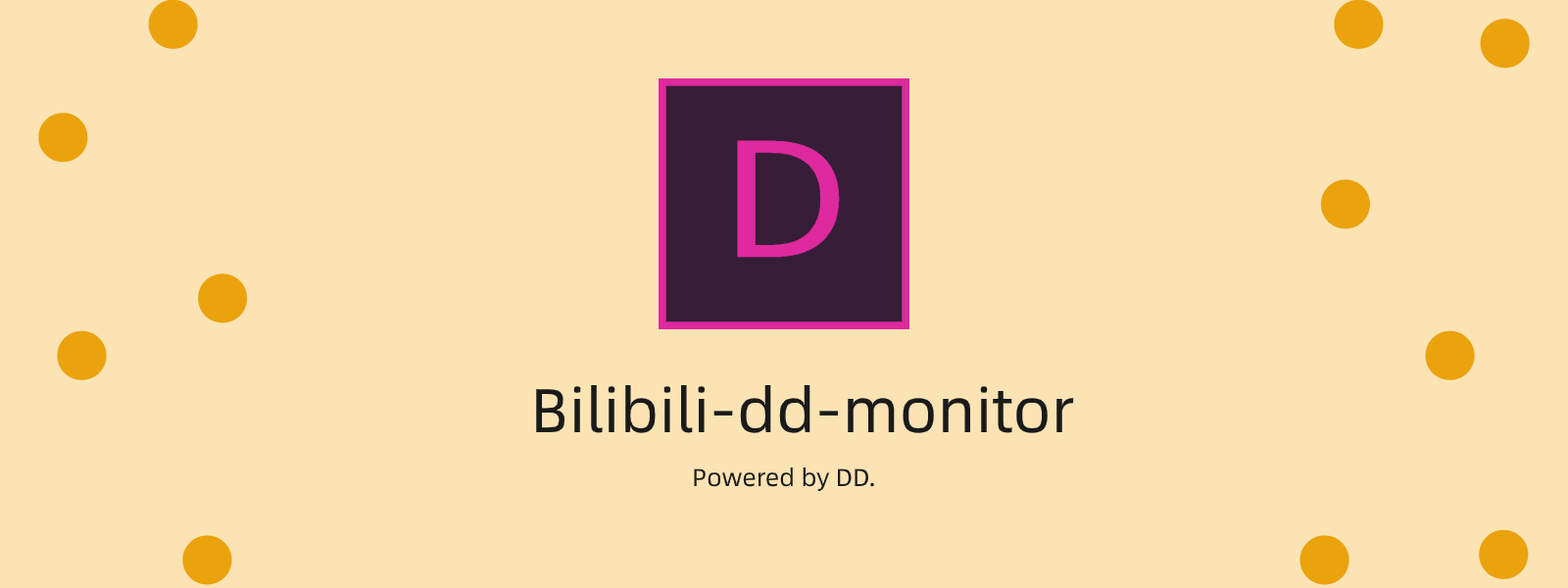
<style>
.page{position:relative;width:1568px;height:588px;background:#fbe3b3}
.page>*{position:absolute;margin:0}
.t1{font:61.7px "AlibabaPuHuiTi-Regular";color:#1a1a1a}
.t2{font:24.5px "AlibabaPuHuiTi-Regular";color:#1a1a1a}
</style>
<div class="page">
<p class="t1" style="left:536px;top:385px;width:538px;height:48px">Bilibili-dd-monitor</p>
<p class="t2" style="left:694px;top:467px;width:180px;height:24px">Powered by DD.</p>
</div>
